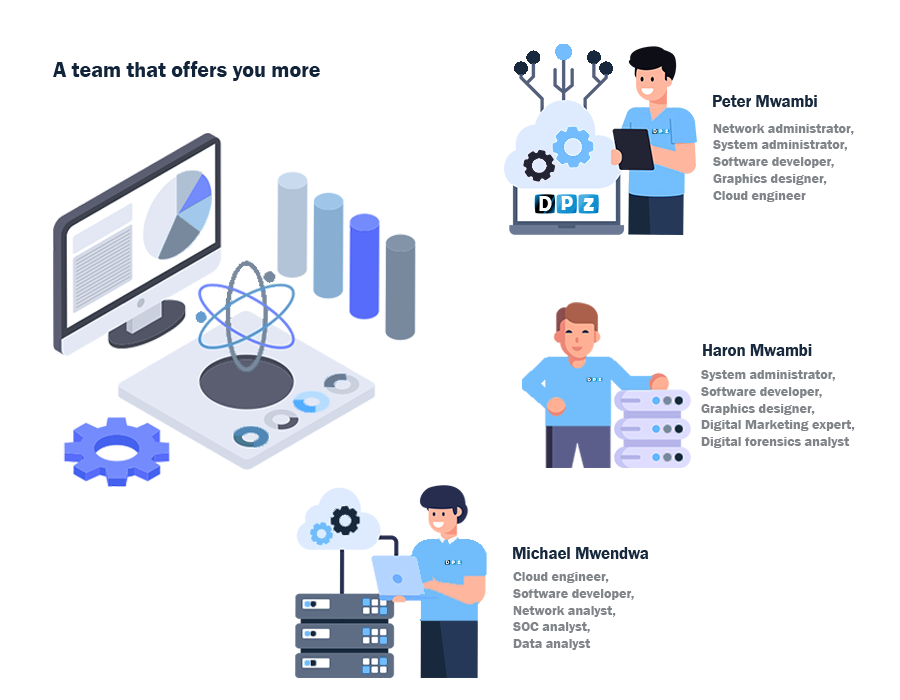
<style>
.page{position:relative;width:900px;height:700px;background:#ffffff}
.page>*{position:absolute;margin:0}
.t1{font:21.9px "FranklinGothic-Demi";color:#12243a}
.t2{font:16.6px "FranklinGothic-Demi";color:#18293d}
.t3{font:14px "FranklinGothic-Demi";color:#808489}
</style>
<div class="page">
<p class="t1" style="left:53px;top:61px;width:267px;height:20px">A team that offers you more</p>
<p class="t2" style="left:713px;top:95px;width:104px;height:12px">Peter Mwambi</p>
<p class="t3" style="left:713px;top:124px;width:141px;height:78px">Network administrator,<br>System administrator,<br>Software developer,<br>Graphics designer, <br>Cloud engineer</p>
<p class="t2" style="left:703px;top:344px;width:109px;height:12px">Haron Mwambi</p>
<p class="t3" style="left:701px;top:370px;width:154px;height:78px">System administrator,<br>Software developer,<br>Graphics designer,<br>Digital Marketing expert,<br>Digital forensics analyst</p>
<p class="t2" style="left:513px;top:547px;width:136px;height:12px">Michael Mwendwa</p>
<p class="t3" style="left:513px;top:572px;width:121px;height:78px">Cloud engineer,<br>Software developer,<br>Network analyst,<br>SOC analyst,<br>Data analyst</p>
</div>
